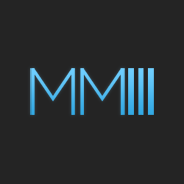
<style>
.page{position:relative;width:184px;height:184px;background:#242424}
.page>*{position:absolute;margin:0}
.t1{font:66.2px "GothamLight";letter-spacing:-0.08em;color:#58c1f4}
</style>
<div class="page">
<p class="t1" style="left:30px;top:68px;width:95px;height:47px">MM</p>
</div>
